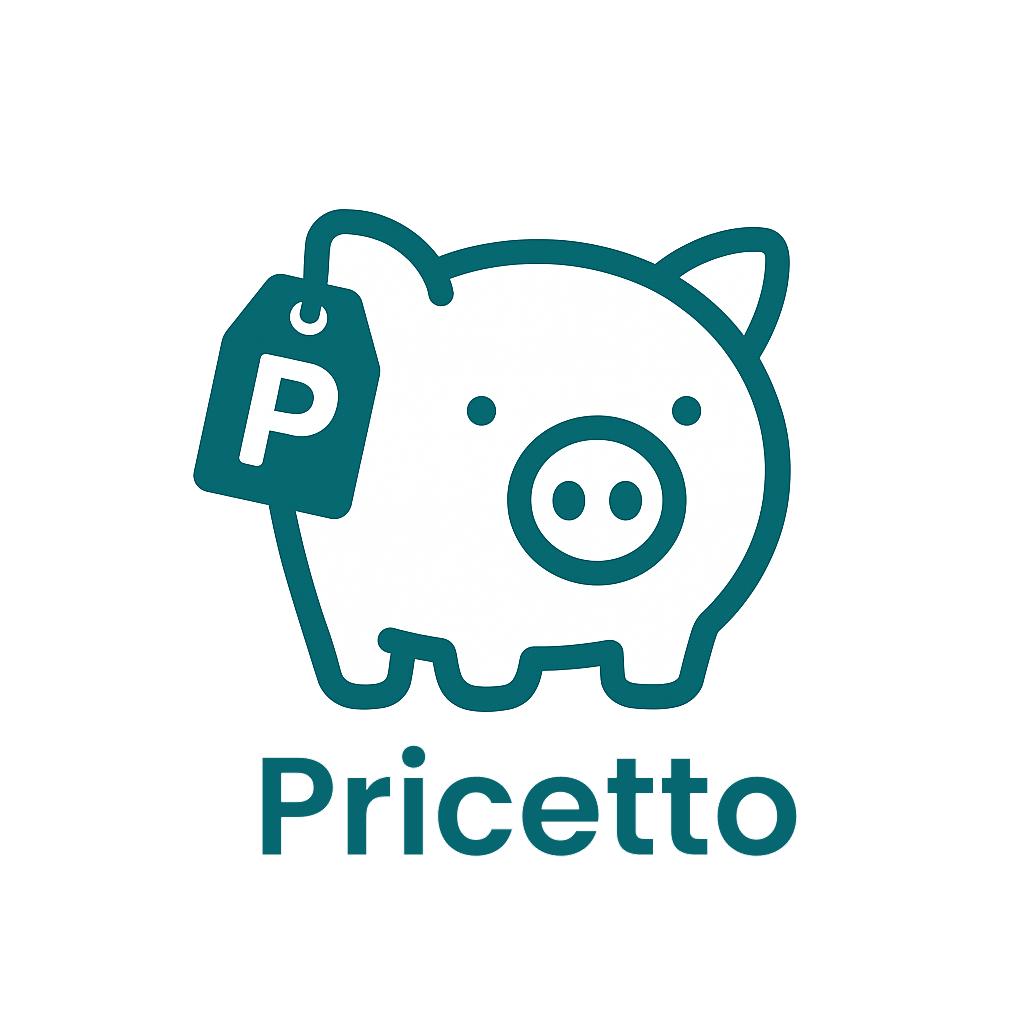
<style>
.page{position:relative;width:1024px;height:1024px;background:#ffffff}
.page>*{position:absolute;margin:0}
.t1{font:140px "Poppins-SemiBold";color:#076770}
</style>
<div class="page">
<p class="t1" style="left:261px;top:744px;width:537px;height:114px">Pricetto</p>
</div>
